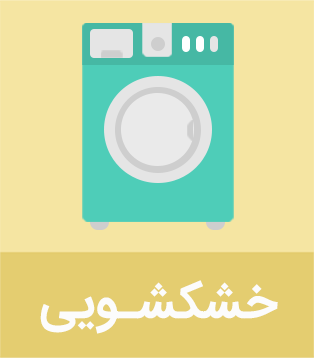
<style>
.page{position:relative;width:314px;height:358px;background:#f5e5a2}
.page>*{position:absolute;margin:0}
.t1{font:49.7px "IRANSansMobile-Bold";color:#fcfcfc}
</style>
<div class="page">
<p class="t1" style="left:40px;top:280px;width:238px;height:54px">خشکشـویی</p>
</div>
